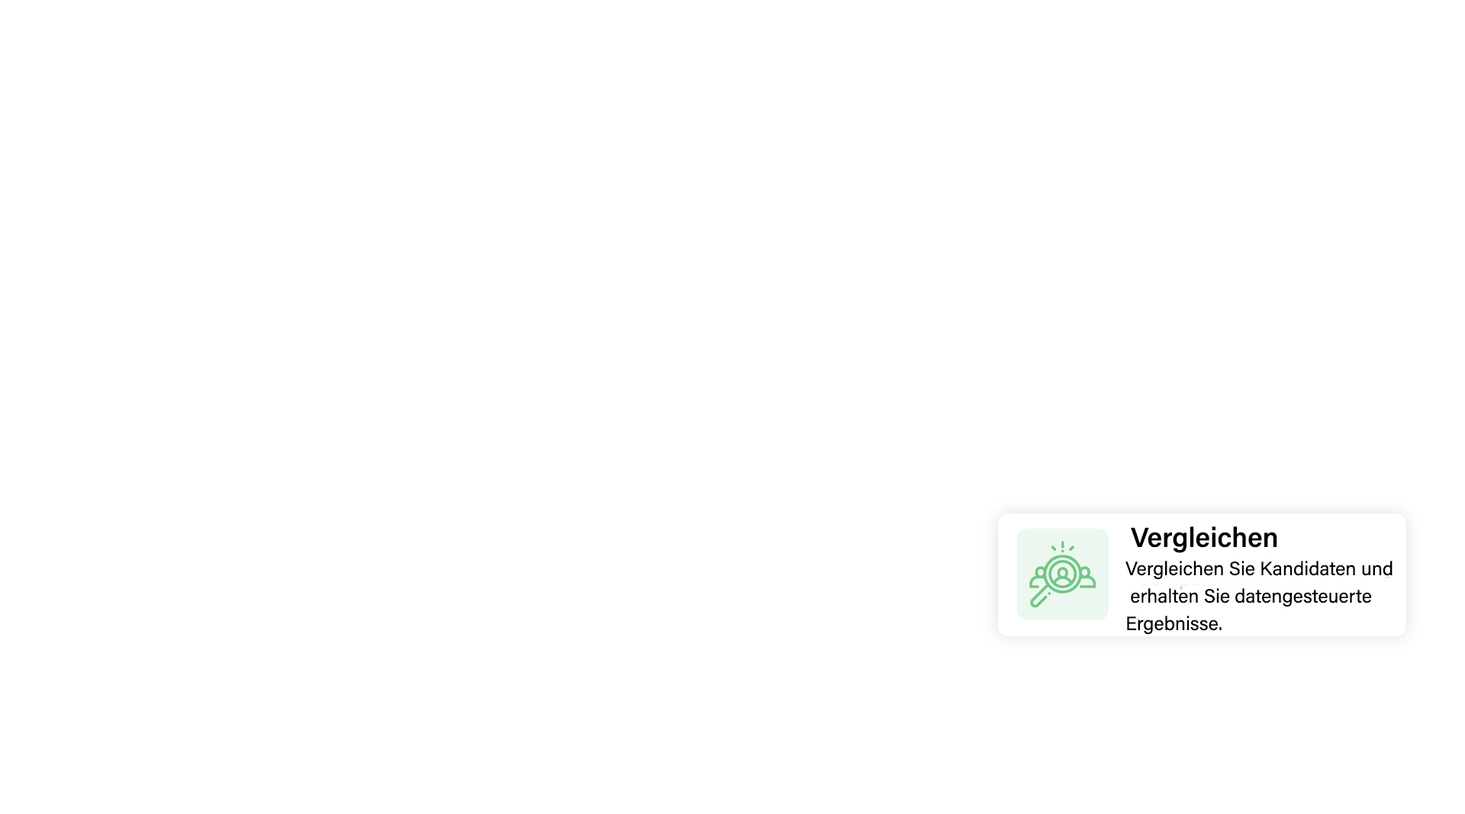
<style>
.page{position:relative;width:1465px;height:814px;background:#ffffff}
.page>*{position:absolute;margin:0}
.t1{font:27.5px "AcuminConcept_578.000wght";color:#000000}
.t2{font:19.1px/13.7px "AcuminConcept-Regular";color:#000000}
</style>
<div class="page">
<p class="t1" style="left:1131px;top:526px;width:146px;height:27px">Vergleichen</p>
<p class="t2" style="left:1125px;top:561px;width:267px;height:74px">Vergleichen Sie Kandidaten und<br><br> erhalten Sie datengesteuerte <br><br>Ergebnisse.</p>
</div>
